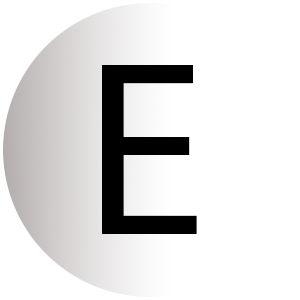
<style>
.page{position:relative;width:300px;height:300px;background:#ffffff}
.page>*{position:absolute;margin:0}
.t1{font:250px "MyriadPro-Regular";color:#000000}
</style>
<div class="page">
<p class="t1" style="left:102px;top:65px;width:95px;height:169px">E</p>
</div>
